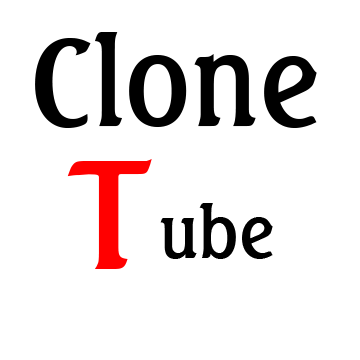
<style>
.page{position:relative;width:360px;height:360px;background:#ffffff}
.page>*{position:absolute;margin:0}
.t1{font:120px "Seagull";color:#000000}
.t2{font:150px "Seagull";color:#ff0000}
.t3{font:70px "Seagull";color:#000000}
</style>
<div class="page">
<p class="t1" style="left:35px;top:32px;width:282px;height:96px">Clone</p>
<p class="t2" style="left:67px;top:159px;width:85px;height:110px">T</p>
<p class="t3" style="left:160px;top:203px;width:113px;height:56px">ube</p>
</div>
